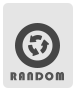
<style>
.page{position:relative;width:75px;height:90px;background:#e5e5e5}
.page>*{position:absolute;margin:0}
.t1{font:12px "Bauhaus93";letter-spacing:0.1em;color:#555555}
</style>
<div class="page">
<p class="t1" style="left:10px;top:72px;width:54px;height:9px">RANDOM</p>
</div>
